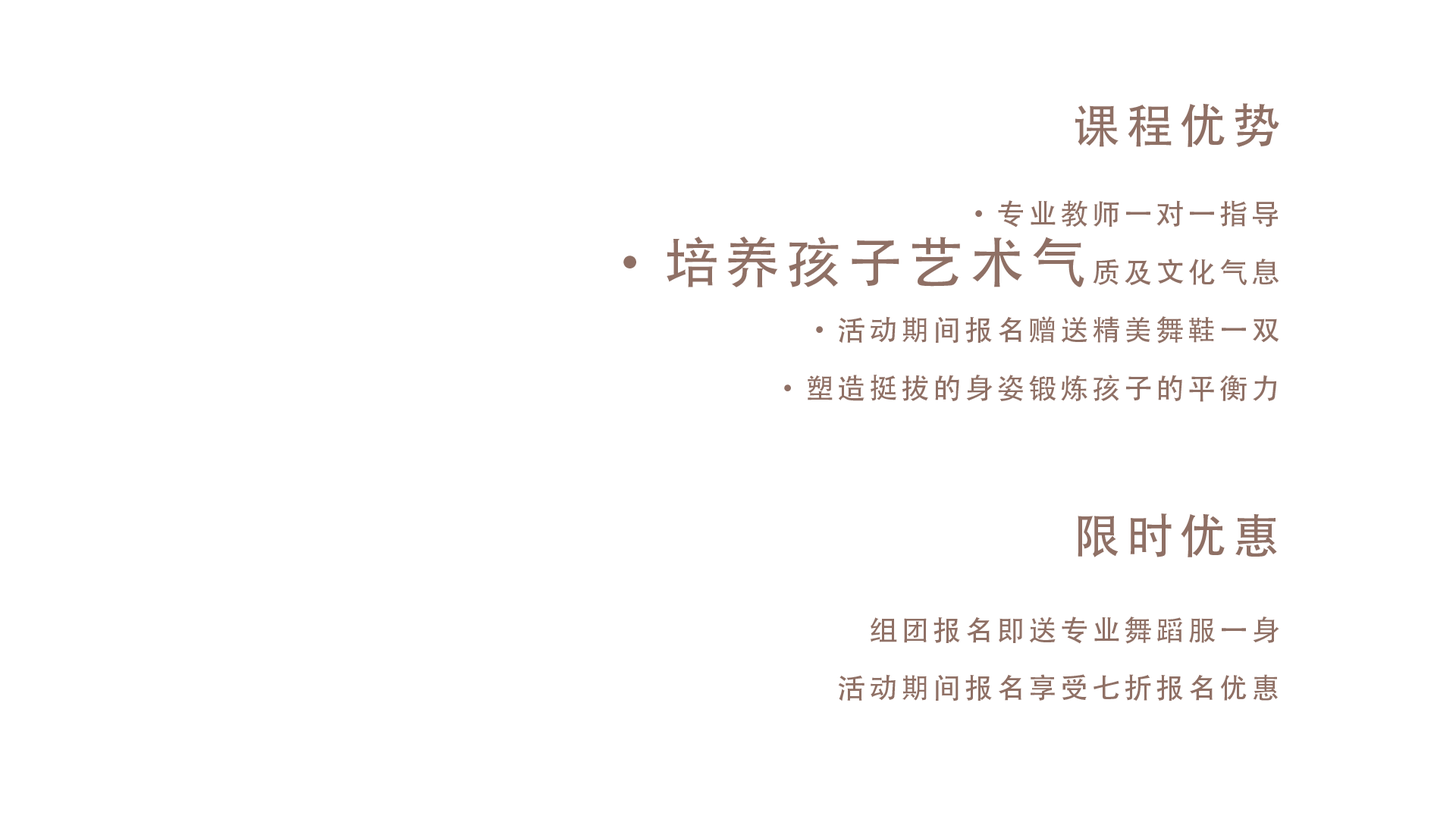
<style>
.page{position:relative;width:1456px;height:819px;background:#ffffff}
.page>*{position:absolute;margin:0}
.t1{font:28.4px/57.9px "AdobeHeitiStd-Regular";letter-spacing:0.12em;color:#8f7065}
.t2{font:47.4px/122.7px "AdobeHeitiStd-Regular";letter-spacing:0.12em;color:#8f7065}
.t3{font:54.6px/57.9px "AdobeHeitiStd-Regular";letter-spacing:0.12em;color:#8f7065}
.t4{font:47.4px/57.9px "AdobeHeitiStd-Regular";letter-spacing:0.12em;color:#8f7065}
.t5{font:28.4px/43.7px "AdobeHeitiStd-Regular";letter-spacing:0.12em;color:#8f7065}
</style>
<div class="page">
<p class="t1" style="left:623px;top:103px;width:656px;height:598px;text-align:right"><span class="t2">课程优势<br><br></span>·专业教师一对一指导<br><span class="t3">·培养孩子艺术气</span>质及文化气息<br>·活动期间报名赠送精美舞鞋一双<br>·塑造挺拔的身姿锻炼孩子的平衡力<br><br><br><span class="t4">限时优惠<br><br></span><span class="t5">组团报名即送专业舞蹈服一身<br></span>活动期间报名享受七折报名优惠</p>
</div>
